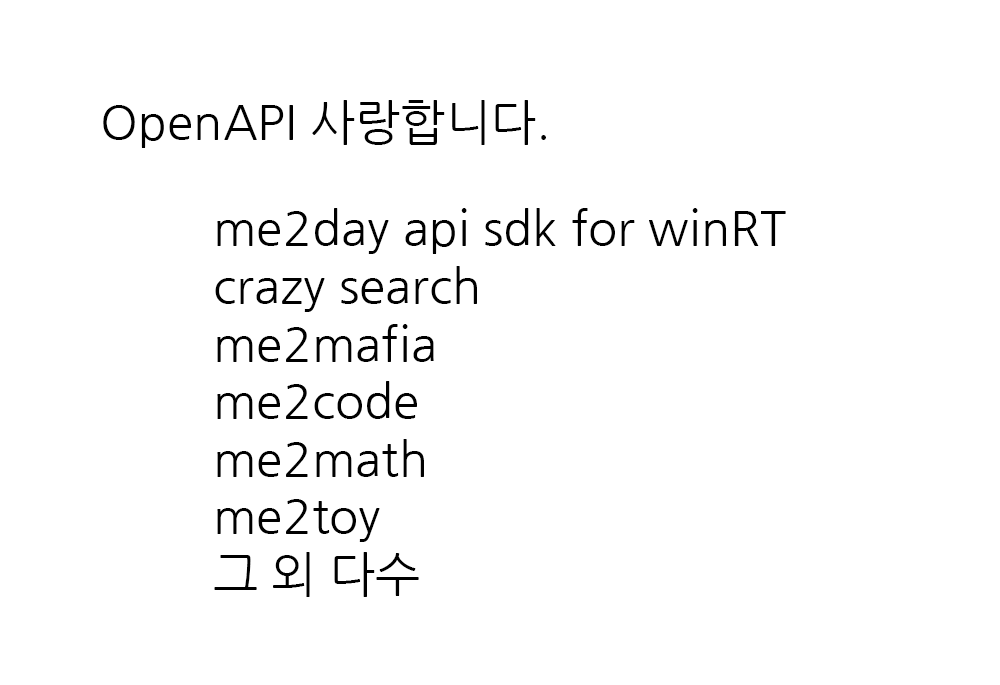
<style>
.page{position:relative;width:1000px;height:685px;background:#ffffff}
.page>*{position:absolute;margin:0}
.t1{font:48px "NanumGothic";color:#000000}
</style>
<div class="page">
<p class="t1" style="left:103px;top:100px;width:443px;height:48px">OpenAPI 사랑합니다.</p>
<p class="t1" style="left:214px;top:208px;width:572px;height:389px">me2day api sdk for winRT<br>crazy search<br>me2mafia<br>me2code<br>me2math<br>me2toy<br>그 외 다수</p>
</div>
